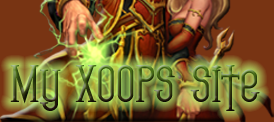
<style>
.page{position:relative;width:274px;height:122px}
.page>*{position:absolute;margin:0}
.t1{font:50px "SFGothicanBold";scale:1.07 1}
</style>
<div class="page">
<p class="t1" style="left:10px;top:65px;width:250px;height:46px">My XOOPS Site</p>
</div>
